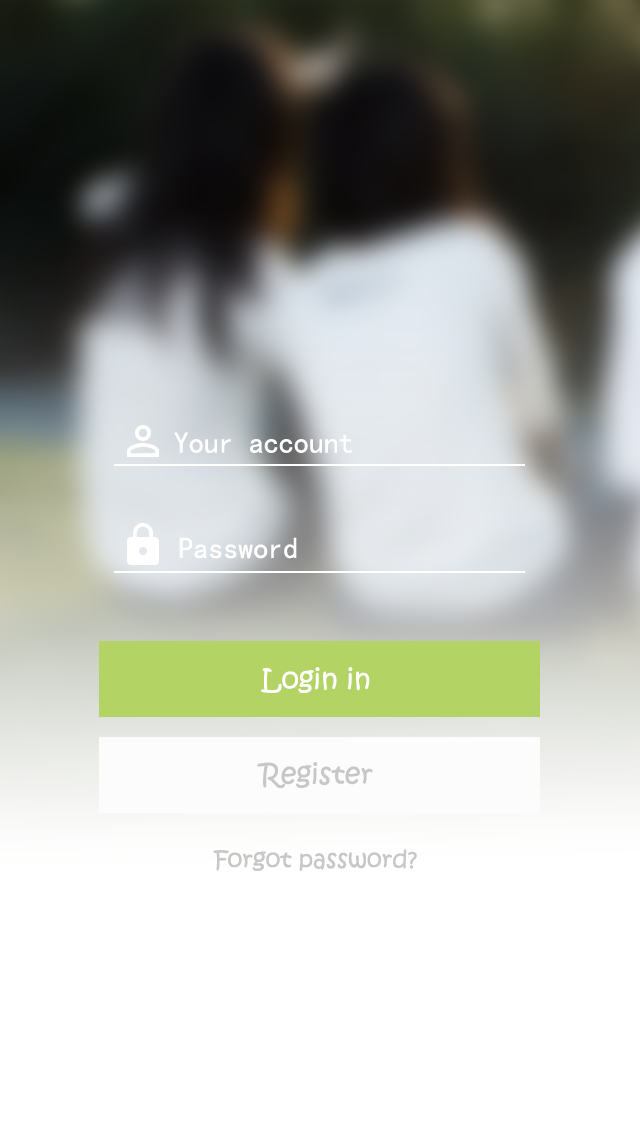
<style>
.page{position:relative;width:640px;height:1136px;background:#ffffff}
.page>*{position:absolute;margin:0}
.t1{font:30px "KaiTi";color:#ffffff}
.t2{font:28px "kitty-";color:#ffffff}
.t3{font:28px "kitty-";color:#c7c7c7}
.t4{font:24px "kitty-";color:#c7c7c7}
</style>
<div class="page">
<p class="t1" style="left:174px;top:432px;width:178px;height:21px">Your account</p>
<p class="t1" style="left:179px;top:537px;width:118px;height:22px">Password</p>
<p class="t2" style="left:261px;top:667px;width:109px;height:26px">Login in</p>
<p class="t3" style="left:257px;top:762px;width:116px;height:27px">Register</p>
<p class="t4" style="left:213px;top:849px;width:204px;height:22px">Forgot password?</p>
</div>
